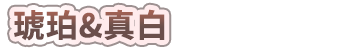
<style>
.page{position:relative;width:360px;height:50px;background:#ffffff}
.page>*{position:absolute;margin:0}
.t1{font:32px "SourceHanSansSC-Bold";font-weight:bold}
</style>
<div class="page">
<p class="t1" style="left:14px;top:9px;width:151px;height:32px">琥珀&amp;真白</p>
</div>
